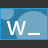
<style>
.page{position:relative;width:48px;height:48px;background:#333333}
.page>*{position:absolute;margin:0}
.t1{font:25.3px "MicrosoftYaHei";color:#ffffff}
</style>
<div class="page">
<p class="t1" style="left:6px;top:21px;width:20px;height:14px">w</p>
</div>
